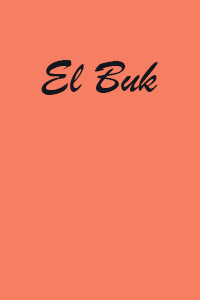
<style>
.page{position:relative;width:200px;height:300px;background:#f67e62}
.page>*{position:absolute;margin:0}
.t1{font:48px "BrushScriptMT";color:#14171d}
</style>
<div class="page">
<p class="t1" style="left:41px;top:60px;width:117px;height:35px">El Buk</p>
</div>
